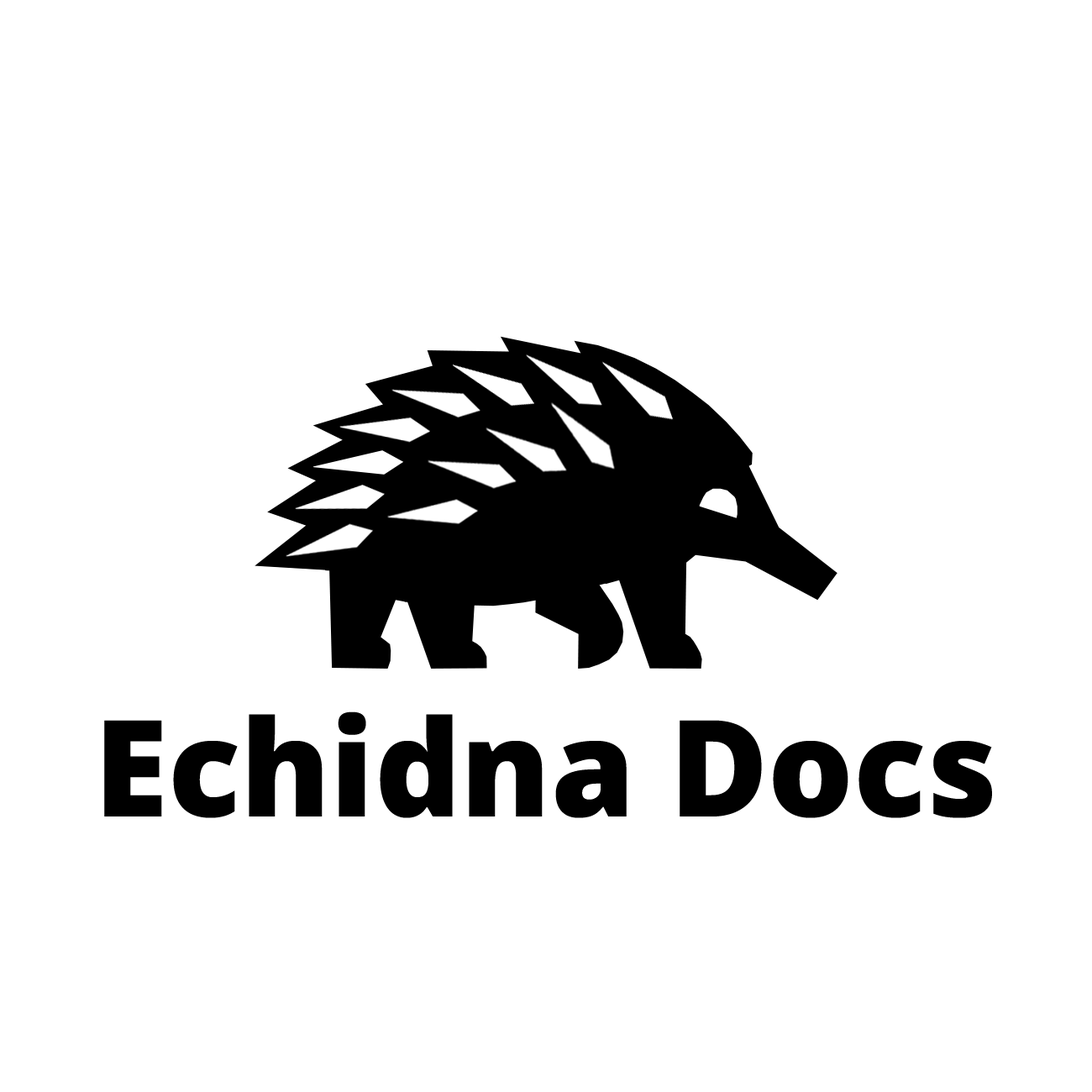
<style>
.page{position:relative;width:1092px;height:1092px;background:#ffffff}
.page>*{position:absolute;margin:0}
.t1{font:134.4px "OpenSans-ExtraBold";color:#000000}
</style>
<div class="page">
<p class="t1" style="left:104px;top:711px;width:888px;height:107px">Echidna Docs</p>
</div>
